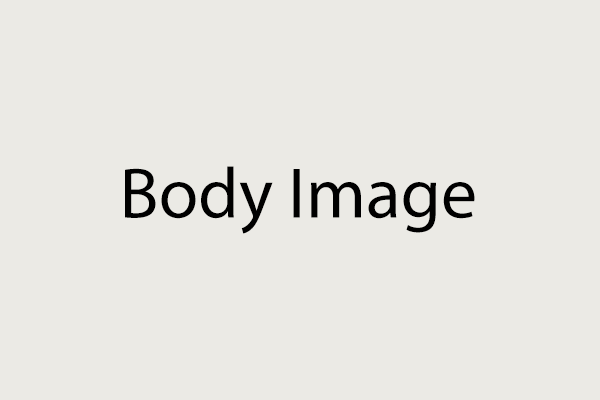
<style>
.page{position:relative;width:600px;height:400px;background:#ebeae5}
.page>*{position:absolute;margin:0}
.t1{font:72px "MyriadPro-Regular";color:#000000}
</style>
<div class="page">
<p class="t1" style="left:125px;top:166px;width:350px;height:68px">Body Image</p>
</div>
